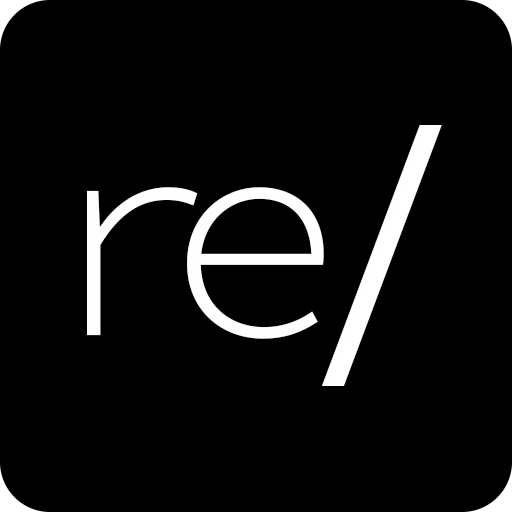
<style>
.page{position:relative;width:512px;height:512px;background:#000000}
.page>*{position:absolute;margin:0}
.t1{font:300px "SourceCodePro-Master0";color:#fefefe}
.t2{font:300px "SourceCodePro-Light";color:#ffffff}
.t3{font:300px "SourceCodePro-Light";letter-spacing:-0.18em;color:#fefefe}
</style>
<div class="page">
<p class="t1" style="left:321px;top:125px;width:109px;height:261px">/</p>
<p class="t2" style="left:330px;top:125px;width:112px;height:261px">/</p>
<p class="t3" style="left:87px;top:187px;width:237px;height:152px">re</p>
</div>
